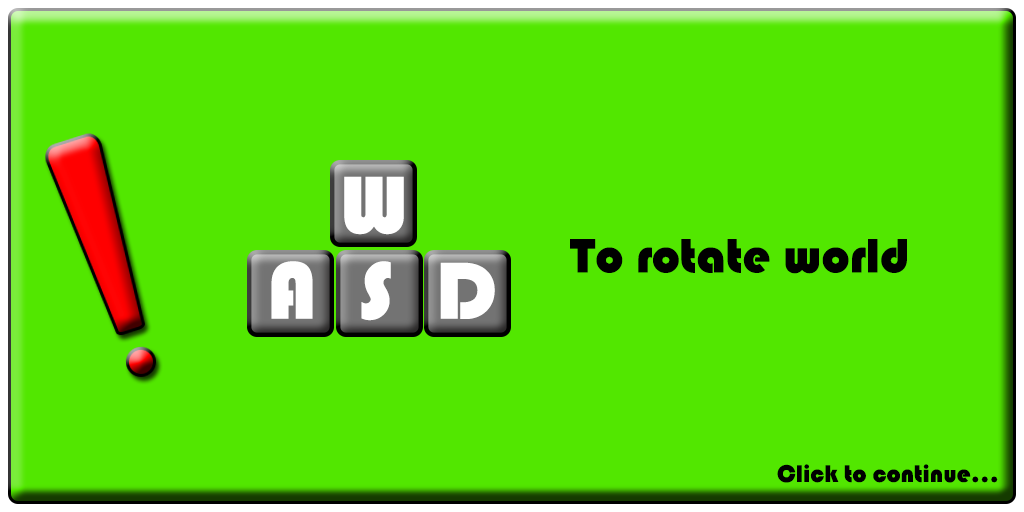
<style>
.page{position:relative;width:1024px;height:512px;background:#52e700}
.page>*{position:absolute;margin:0}
.t1{font:83.9px "Bauhaus93";color:#ffffff}
.t2{font:50px "Bauhaus93";color:#000000}
.t3{font:25px "Bauhaus93";color:#000000}
</style>
<div class="page">
<p class="t1" style="left:344px;top:176px;width:60px;height:59px">W</p>
<p class="t2" style="left:570px;top:239px;width:337px;height:35px">To rotate world</p>
<p class="t1" style="left:271px;top:261px;width:224px;height:60px">A  S  D</p>
<p class="t3" style="left:777px;top:464px;width:221px;height:19px">Click to continue...</p>
</div>
